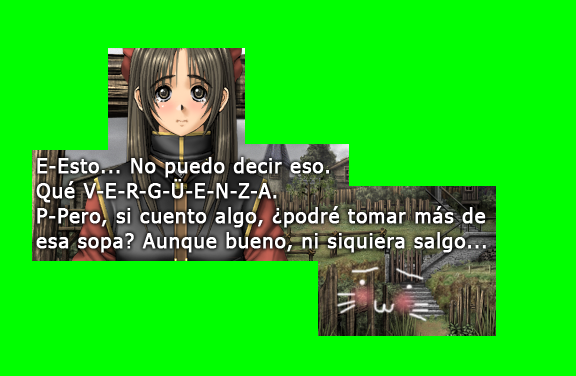
<style>
.page{position:relative;width:576px;height:376px;background:#00ff00}
.page>*{position:absolute;margin:0}
.t1{font:20px/25px "Tahoma";letter-spacing:0.04em;color:#ffffff;font-weight:bold}
</style>
<div class="page">
<p class="t1" style="left:36px;top:157px;width:450px;height:96px">E-Esto... No puedo decir eso.<br>Qué V-E-R-G-Ü-E-N-Z-A.<br>P-Pero, si cuento algo, ¿podré tomar más de <br>esa sopa? Aunque bueno, ni siquiera salgo...</p>
</div>
